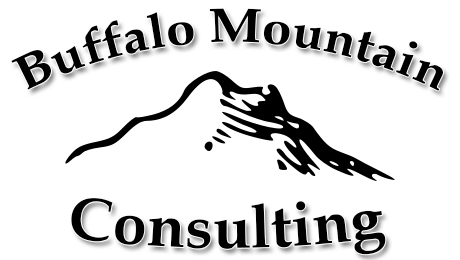
<style>
.page{position:relative;width:460px;height:260px;background:#ffffff}
.page>*{position:absolute;margin:0}
.t1{font:48px "Palatino-Bold";color:#000000}
.t2{font:60px "Palatino-Bold";color:#000000}
</style>
<div class="page">
<p class="t1" style="left:11px;top:8px;width:432px;height:83px;text-align:center">Buffalo Mountain</p>
<p class="t2" style="left:71px;top:198px;width:315px;height:57px">Consulting</p>
</div>
